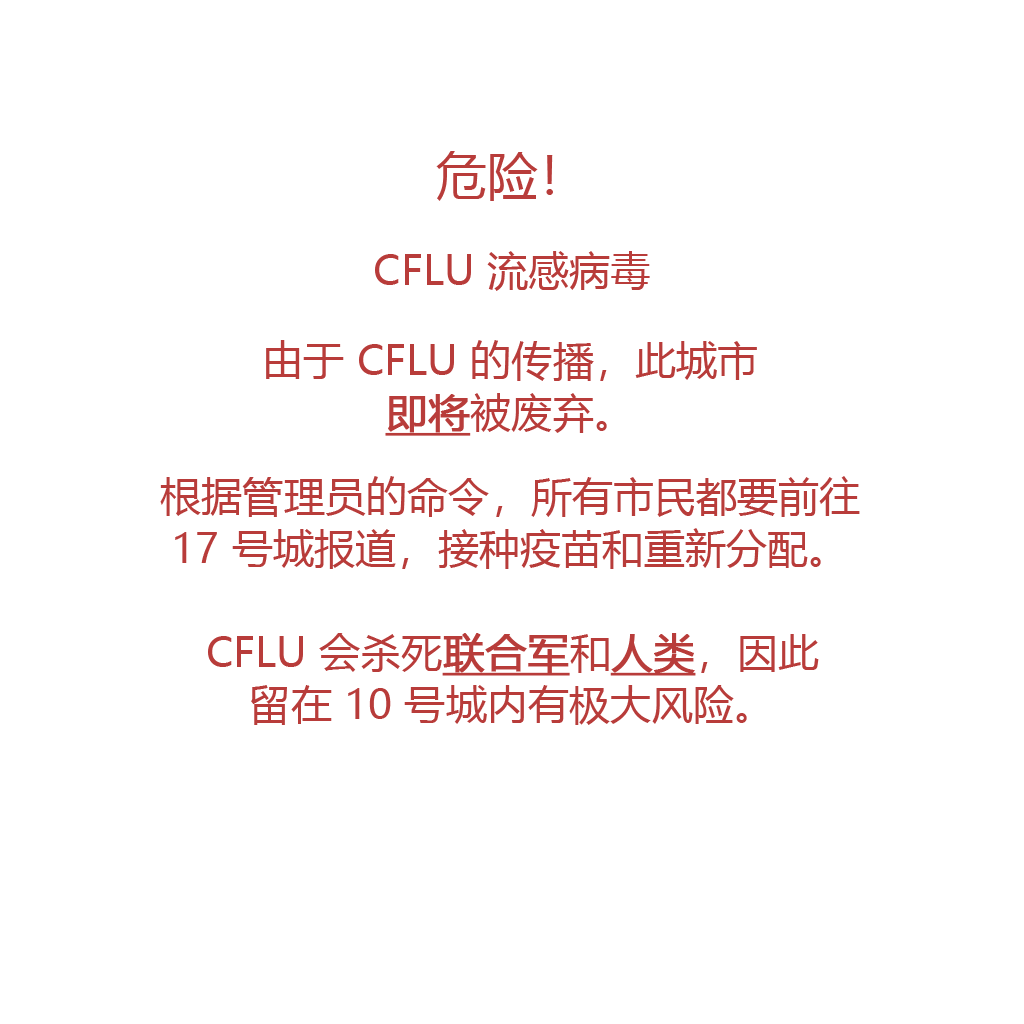
<style>
.page{position:relative;width:1024px;height:1024px;background:#ffffff}
.page>*{position:absolute;margin:0}
.t1{font:51px "MicrosoftYaHei";color:#b83c39}
.t2{font:41.2px "MicrosoftYaHei";color:#b83c39}
.t3{font:41.2px/52.1px "MicrosoftYaHei";color:#b83c39}
.t4{font:41.2px/52.1px "MicrosoftYaHei";color:#b83c39;font-weight:bold;text-decoration:underline}
</style>
<div class="page">
<p class="t1" style="left:436px;top:151px;width:117px;height:50px">危险！</p>
<p class="t2" style="left:375px;top:251px;width:275px;height:40px">CFLU 流感病毒</p>
<p class="t3" style="left:266px;top:340px;width:491px;height:96px;text-align:center">由于 CFLU 的传播，此城市<br><span class="t4">即将</span>被废弃。</p>
<p class="t3" style="left:160px;top:476px;width:700px;height:93px;text-align:center">根据管理员的命令，所有市民都要前往<br>17 号城报道，接种疫苗和重新分配。</p>
<p class="t3" style="left:208px;top:633px;width:611px;height:92px;text-align:center">CFLU 会杀死<span class="t4">联合军</span>和<span class="t4">人类</span>，因此<br>留在 10 号城内有极大风险。</p>
</div>
